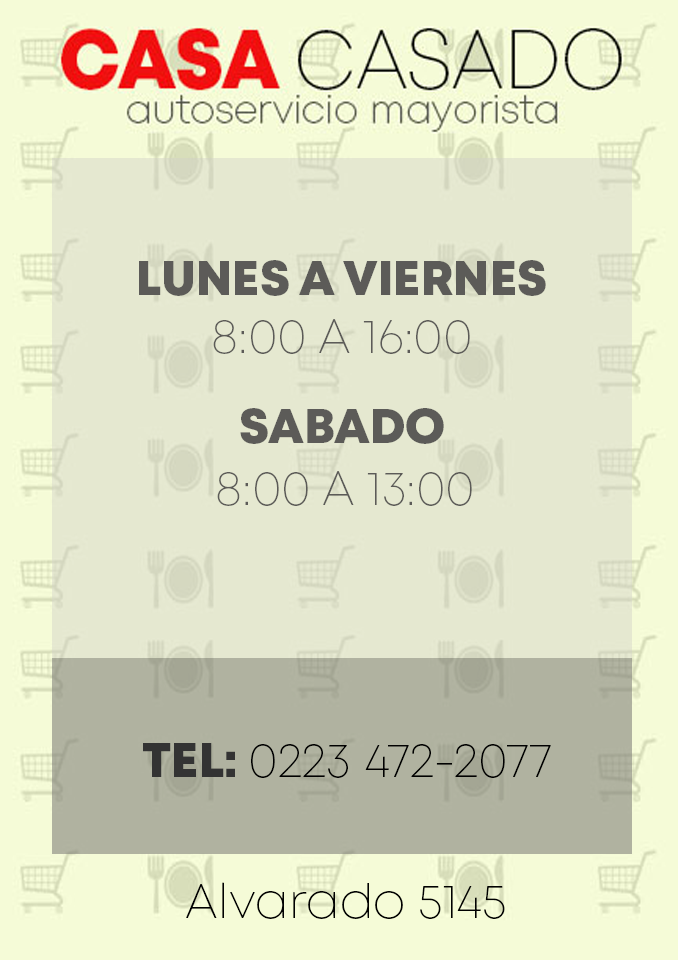
<style>
.page{position:relative;width:678px;height:960px;background:#e5e8d0}
.page>*{position:absolute;margin:0}
.t1{font:48px "Mont-HeavyDEMO";color:#5c5b58}
.t2{font:48px "Mont-ExtraLightDEMO";color:#5c5b58}
.t3{font:48px "Mont-ExtraLightDEMO";color:#000000}
.t4{font:48px "Mont-HeavyDEMO";color:#424242}
</style>
<div class="page">
<p class="t1" style="left:139px;top:260px;width:407px;height:36px">LUNES A VIERNES</p>
<p class="t2" style="left:213px;top:319px;width:257px;height:35px">8:00 A 16:00</p>
<p class="t1" style="left:240px;top:408px;width:204px;height:36px">SABADO</p>
<p class="t2" style="left:217px;top:471px;width:255px;height:35px">8:00 A 13:00</p>
<p class="t3" style="left:143px;top:743px;width:408px;height:35px"><span class="t4">TEL: </span>0223 472-2077</p>
<p class="t3" style="left:186px;top:882px;width:319px;height:37px">Alvarado 5145</p>
</div>
